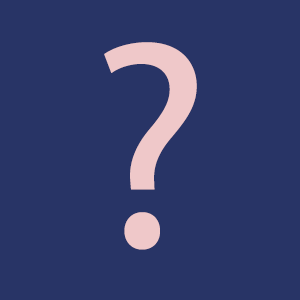
<style>
.page{position:relative;width:300px;height:300px;background:#283466}
.page>*{position:absolute;margin:0}
.t1{font:297.8px "MyriadPro-Regular";color:#efc8c9}
</style>
<div class="page">
<p class="t1" style="left:104px;top:42px;width:93px;height:208px">?</p>
</div>
